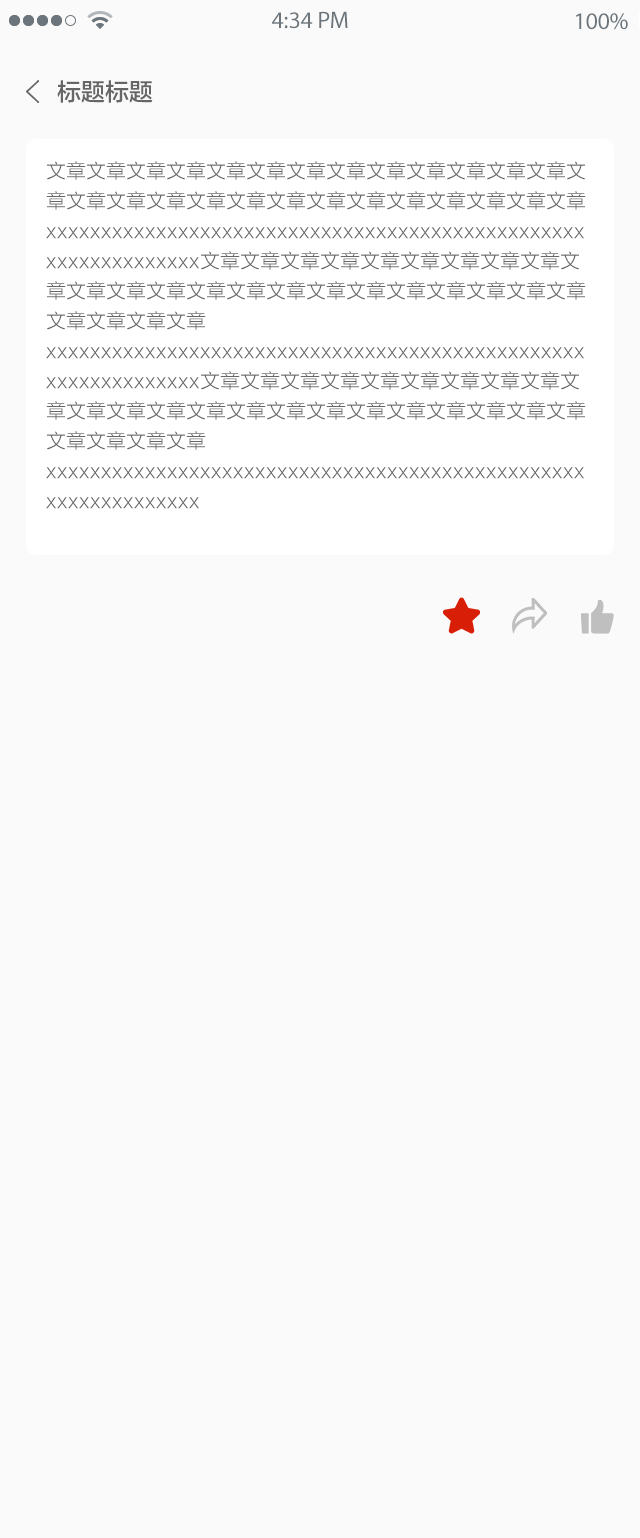
<style>
.page{position:relative;width:640px;height:1538px;background:#fafafa}
.page>*{position:absolute;margin:0}
.t1{font:24px "MyriadPro-Regular";color:#6c757b}
.t2{font:24px "FZLTZHK--GBK1-0";color:#666666}
.t3{font:20px/30px "FZLTXHK";color:#666666}
</style>
<div class="page">
<p class="t1" style="left:272px;top:11px;width:76px;height:18px">4:34 PM</p>
<p class="t1" style="left:576px;top:13px;width:52px;height:17px">100%</p>
<p class="t2" style="left:57px;top:80px;width:96px;height:23px">标题标题</p>
<p class="t3" style="left:46px;top:161px;width:540px;height:348px">文章文章文章文章文章文章文章文章文章文章文章文章文章文章文章文章文章文章文章文章文章文章文章文章文章文章文章xxxxxxxxxxxxxxxxxxxxxxxxxxxxxxxxxxxxxxxxxxxxxxxxxxxxxxxxxxxxxxx文章文章文章文章文章文章文章文章文章文章文章文章文章文章文章文章文章文章文章文章文章文章文章文章文章文章文章xxxxxxxxxxxxxxxxxxxxxxxxxxxxxxxxxxxxxxxxxxxxxxxxxxxxxxxxxxxxxxx文章文章文章文章文章文章文章文章文章文章文章文章文章文章文章文章文章文章文章文章文章文章文章文章文章文章文章xxxxxxxxxxxxxxxxxxxxxxxxxxxxxxxxxxxxxxxxxxxxxxxxxxxxxxxxxxxxxxx</p>
</div>
